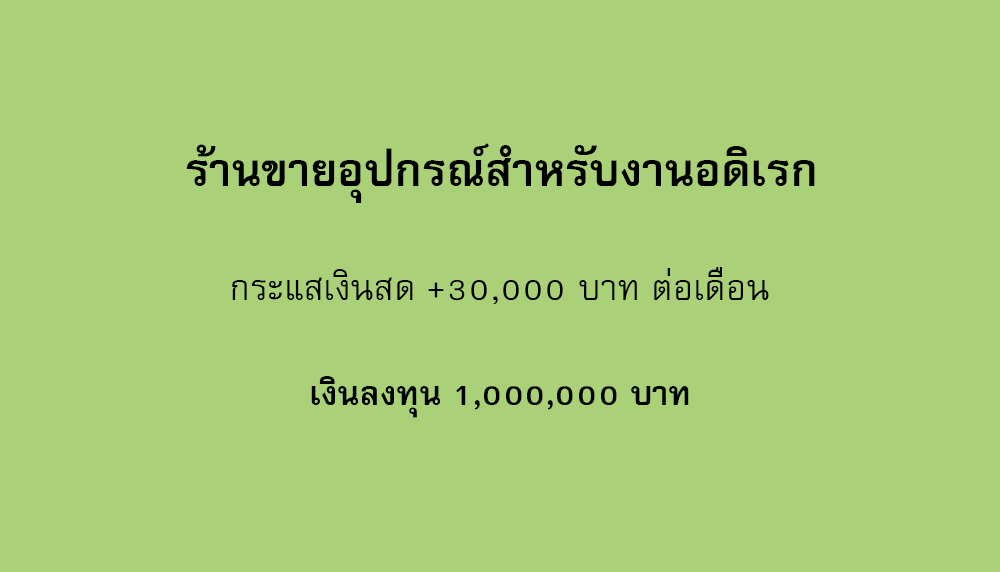
<style>
.page{position:relative;width:1000px;height:572px;background:#aad178}
.page>*{position:absolute;margin:0}
.t1{font:64px "FreesiaUPCBold";color:#000000}
.t2{font:50px "FreesiaUPC";color:#000000}
.t3{font:47px "FreesiaUPCBold";color:#000000}
</style>
<div class="page">
<p class="t1" style="left:186px;top:143px;width:629px;height:60px">ร้านขายอุปกรณ์สำหรับงานอดิเรก</p>
<p class="t2" style="left:232px;top:267px;width:537px;height:38px">กระแสเงินสด +30,000 บาท ต่อเดือน</p>
<p class="t3" style="left:311px;top:376px;width:378px;height:42px">เงินลงทุน 1,000,000 บาท</p>
</div>
